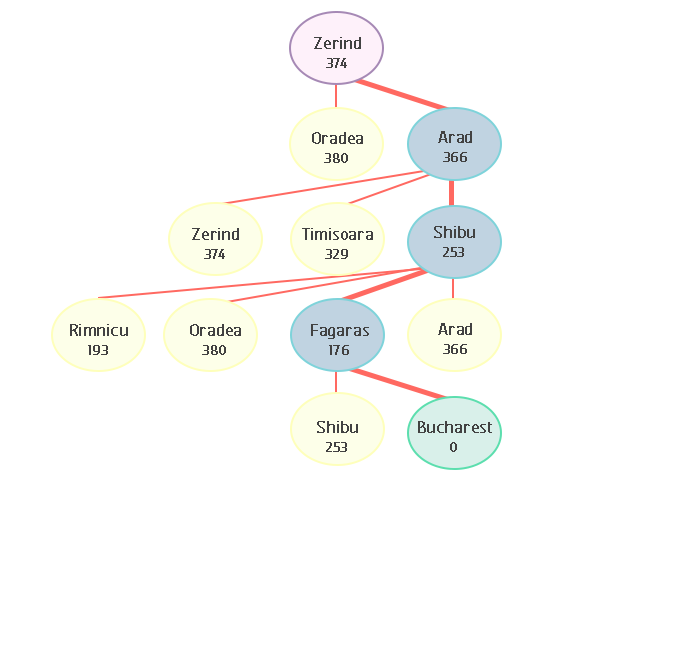
<style>
.page{position:relative;width:674px;height:660px;background:#ffffff}
.page>*{position:absolute;margin:0}
.t1{font:20.8px "FCActiveRegular";color:#424242;font-weight:bold}
.t2{font:16.7px "FCActiveRegular";color:#424141;font-weight:bold}
</style>
<div class="page">
<p class="t1" style="left:314px;top:37px;width:47px;height:12px">Zerind</p>
<p class="t2" style="left:326px;top:58px;width:21px;height:10px">374</p>
<p class="t1" style="left:312px;top:132px;width:51px;height:12px">Oradea</p>
<p class="t1" style="left:438px;top:131px;width:34px;height:12px">Arad</p>
<p class="t2" style="left:324px;top:153px;width:24px;height:10px">380</p>
<p class="t2" style="left:443px;top:152px;width:24px;height:10px">366</p>
<p class="t1" style="left:192px;top:228px;width:47px;height:12px">Zerind</p>
<p class="t1" style="left:302px;top:228px;width:71px;height:12px">Timisoara</p>
<p class="t1" style="left:434px;top:226px;width:41px;height:12px">Shibu</p>
<p class="t2" style="left:204px;top:249px;width:21px;height:10px">374</p>
<p class="t2" style="left:325px;top:249px;width:23px;height:10px">329</p>
<p class="t2" style="left:443px;top:247px;width:21px;height:10px">253</p>
<p class="t1" style="left:70px;top:324px;width:58px;height:12px">Rimnicu</p>
<p class="t1" style="left:190px;top:324px;width:51px;height:12px">Oradea</p>
<p class="t1" style="left:311px;top:324px;width:58px;height:15px">Fagaras</p>
<p class="t1" style="left:438px;top:323px;width:34px;height:12px">Arad</p>
<p class="t2" style="left:88px;top:345px;width:20px;height:10px">193</p>
<p class="t2" style="left:202px;top:345px;width:24px;height:10px">380</p>
<p class="t2" style="left:329px;top:345px;width:20px;height:10px">176</p>
<p class="t2" style="left:443px;top:344px;width:24px;height:10px">366</p>
<p class="t1" style="left:317px;top:421px;width:41px;height:12px">Shibu</p>
<p class="t1" style="left:418px;top:421px;width:74px;height:12px">Bucharest</p>
<p class="t2" style="left:326px;top:442px;width:21px;height:10px">253</p>
<p class="t2" style="left:450px;top:442px;width:7px;height:10px">0</p>
</div>
